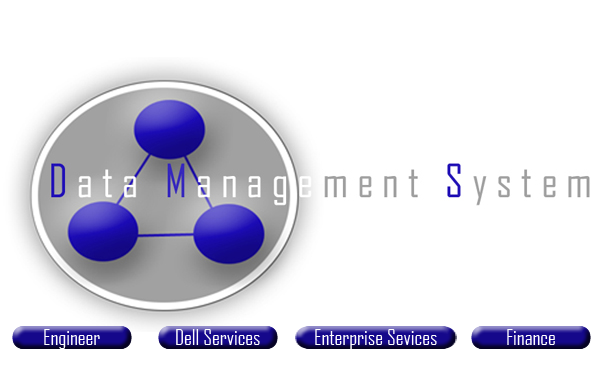
<style>
.page{position:relative;width:616px;height:390px;background:#ffffff}
.page>*{position:absolute;margin:0}
.t1{font:20.8px "AgencyFB-Reg";color:#fefefe}
</style>
<div class="page">
<p class="t1" style="left:44px;top:329px;width:56px;height:20px">Engineer</p>
<p class="t1" style="left:176px;top:329px;width:84px;height:16px">Dell Services</p>
<p class="t1" style="left:315px;top:329px;width:122px;height:20px">Enterprise Sevices</p>
<p class="t1" style="left:507px;top:329px;width:48px;height:16px">Finance</p>
</div>
